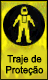
<style>
.page{position:relative;width:48px;height:80px}
.page>*{position:absolute;margin:0}
.t1{font:10px/11px "ArialMT";letter-spacing:-0.02em;color:#000001;font-weight:bold;scale:0.93 1}
</style>
<div class="page">
<p class="t1" style="left:6px;top:55px;width:38px;height:21px;text-align:center">Traje de<br>Proteção</p>
</div>
